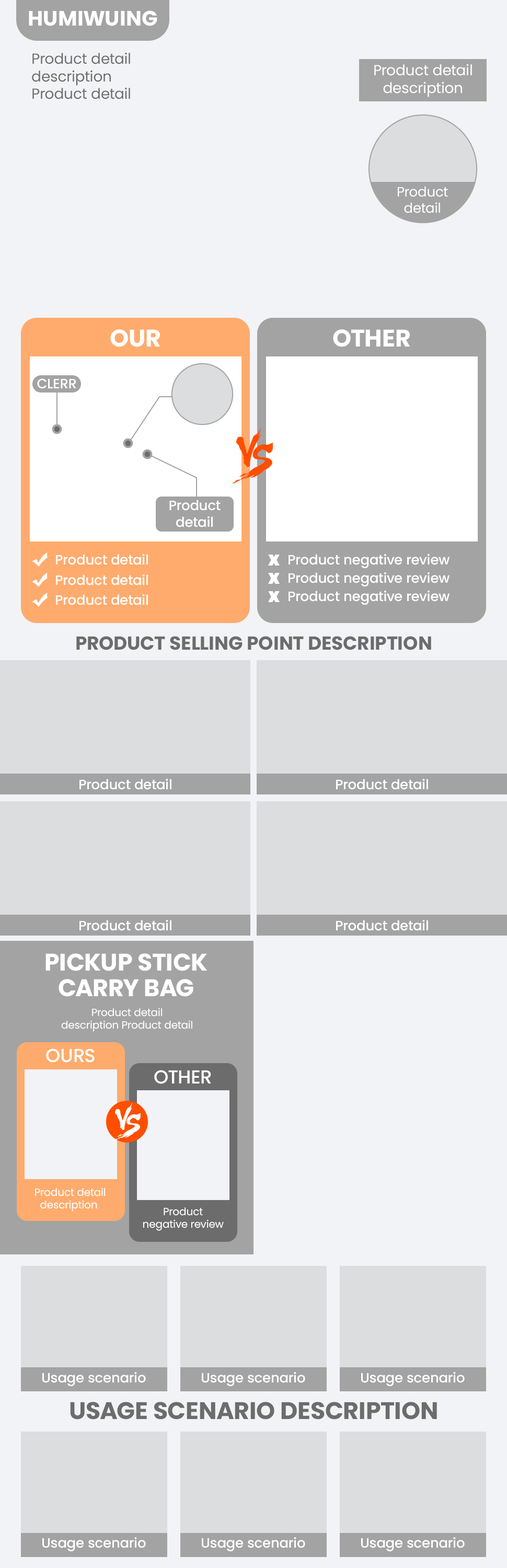
<style>
.page{position:relative;width:507px;height:1568px;background:#f2f3f6}
.page>*{position:absolute;margin:0}
.t1{font:20.9px "Poppins-Bold";color:#ffffff}
.t2{font:14.6px "Poppins-Regular";color:#6c6c6c}
.t3{font:14.6px "Poppins-Regular";color:#ffffff}
.t4{font:13.6px "Poppins-Regular";color:#ffffff}
.t5{font:24px "Poppins-Bold";color:#ffffff}
.t6{font:13.6px "Poppins-Medium";color:#ffffff}
.t7{font:18.8px "Poppins-Bold";color:#6c6c6c;text-transform:uppercase}
.t8{font:24px/25.6px "Poppins-Bold";color:#ffffff;text-transform:uppercase}
.t9{font:10.5px "Poppins-Regular";color:#ffffff}
.t10{font:18.8px "Poppins-Medium";color:#ffffff;text-transform:uppercase}
.t11{font:18.8px "Poppins-Medium";color:#ffffff}
.t12{font:24px "Poppins-Bold";color:#6c6c6c;text-transform:uppercase}
</style>
<div class="page">
<p class="t1" style="left:29px;top:10px;width:128px;height:16px">HUMIWUING</p>
<p class="t2" style="left:32px;top:52px;width:98px;height:47px">Product detail<br>description<br>Product detail</p>
<p class="t3" style="left:374px;top:64px;width:98px;height:33px;text-align:center">Product detail<br>description</p>
<p class="t4" style="left:398px;top:186px;width:50px;height:27px;text-align:center">Product<br>detail</p>
<p class="t5" style="left:110px;top:329px;width:50px;height:18px">OUR</p>
<p class="t5" style="left:333px;top:329px;width:77px;height:18px">OTHER</p>
<p class="t6" style="left:37px;top:378px;width:39px;height:11px">CLERR</p>
<p class="t6" style="left:169px;top:500px;width:52px;height:27px;text-align:center">Product<br>detail</p>
<p class="t6" style="left:56px;top:554px;width:92px;height:11px">Product detail</p>
<p class="t6" style="left:289px;top:554px;width:161px;height:14px">Product negative review</p>
<p class="t6" style="left:56px;top:574px;width:92px;height:11px">Product detail</p>
<p class="t6" style="left:289px;top:572px;width:161px;height:14px">Product negative review</p>
<p class="t6" style="left:289px;top:591px;width:161px;height:14px">Product negative review</p>
<p class="t6" style="left:56px;top:594px;width:92px;height:11px">Product detail</p>
<p class="t7" style="left:76px;top:636px;width:355px;height:14px">Product selling point description</p>
<p class="t6" style="left:79px;top:779px;width:92px;height:11px">Product detail</p>
<p class="t6" style="left:336px;top:779px;width:92px;height:11px">Product detail</p>
<p class="t6" style="left:79px;top:920px;width:92px;height:11px">Product detail</p>
<p class="t6" style="left:336px;top:920px;width:92px;height:11px">Product detail</p>
<p class="t8" style="left:45px;top:953px;width:162px;height:44px;text-align:center">PICKUP STICK<br>CARRY BAG</p>
<p class="t9" style="left:61px;top:1008px;width:131px;height:24px;text-align:center">Product detail<br>description Product detail</p>
<p class="t10" style="left:46px;top:1048px;width:49px;height:15px">ours</p>
<p class="t11" style="left:154px;top:1070px;width:57px;height:14px">OTHER</p>
<p class="t9" style="left:35px;top:1187px;width:71px;height:25px;text-align:center">Product detail<br>description</p>
<p class="t9" style="left:143px;top:1207px;width:81px;height:24px;text-align:center">Product<br>negative review</p>
<p class="t6" style="left:42px;top:1372px;width:104px;height:14px">Usage scenario</p>
<p class="t6" style="left:202px;top:1372px;width:103px;height:14px">Usage scenario</p>
<p class="t6" style="left:361px;top:1372px;width:104px;height:14px">Usage scenario</p>
<p class="t12" style="left:70px;top:1402px;width:367px;height:18px">Usage scenario description</p>
<p class="t6" style="left:42px;top:1537px;width:104px;height:14px">Usage scenario</p>
<p class="t6" style="left:202px;top:1537px;width:103px;height:14px">Usage scenario</p>
<p class="t6" style="left:361px;top:1537px;width:104px;height:14px">Usage scenario</p>
</div>
